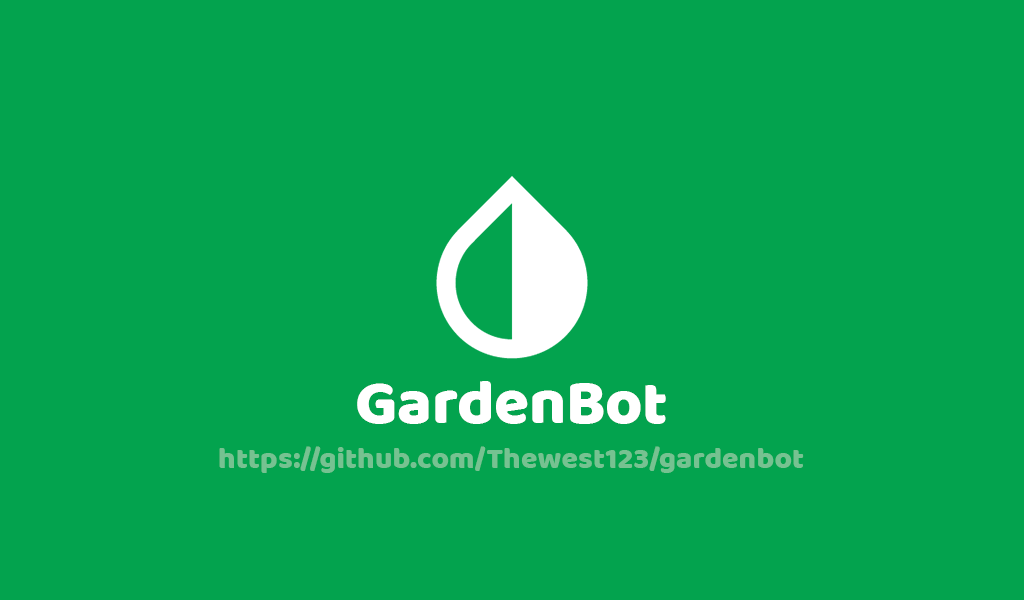
<style>
.page{position:relative;width:1024px;height:600px;background:#03a34e}
.page>*{position:absolute;margin:0}
.t1{font:63.5px "Baloo";color:#ffffff}
.t2{font:30.3px "Baloo";color:#76c291}
</style>
<div class="page">
<p class="t1" style="left:357px;top:381px;width:309px;height:43px">GardenBot</p>
<p class="t2" style="left:219px;top:446px;width:585px;height:27px">https://github.com/Thewest123/gardenbot</p>
</div>
